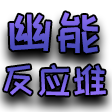
<style>
.page{position:relative;width:112px;height:112px}
.page>*{position:absolute;margin:0}
.t1{font:36px "HappyZcool-2016"}
.t2{font:48px "HappyZcool-2016"}
</style>
<div class="page">
<p class="t1" style="left:4px;top:12px;width:102px;height:84px;text-align:center"><span class="t2">幽能<br></span>反应堆</p>
</div>
